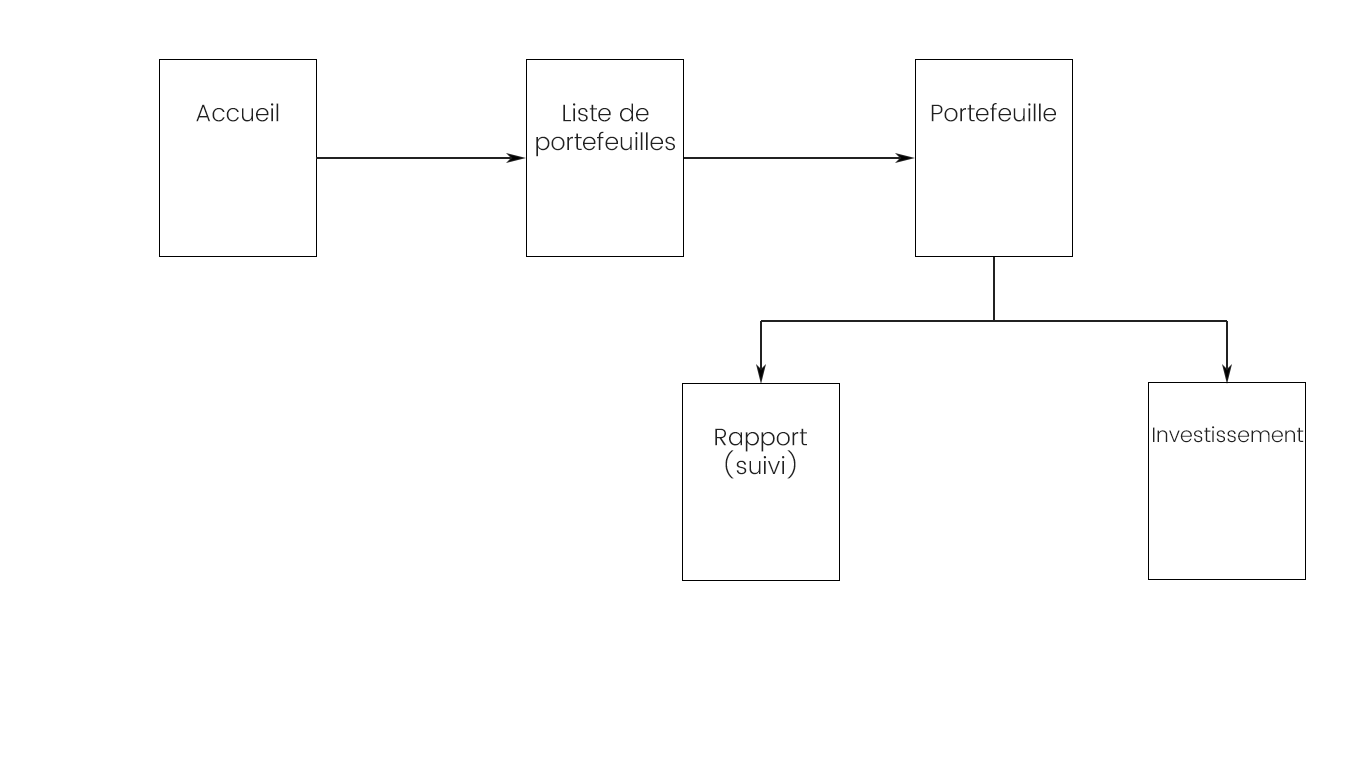
<style>
.page{position:relative;width:1366px;height:768px;background:#ffffff}
.page>*{position:absolute;margin:0}
.t1{font:24px "Poppins-Light";color:#212121}
.t2{font:21px "Poppins-Light";color:#212121}
</style>
<div class="page">
<p class="t1" style="left:196px;top:103px;width:83px;height:19px">Accueil</p>
<p class="t1" style="left:536px;top:103px;width:139px;height:54px;text-align:center">Liste de portefeuilles</p>
<p class="t1" style="left:931px;top:103px;width:125px;height:19px">Portefeuille</p>
<p class="t1" style="left:715px;top:428px;width:92px;height:51px;text-align:center">Rapport<br>(suivi)</p>
<p class="t2" style="left:1153px;top:426px;width:151px;height:17px">Investissement</p>
</div>
